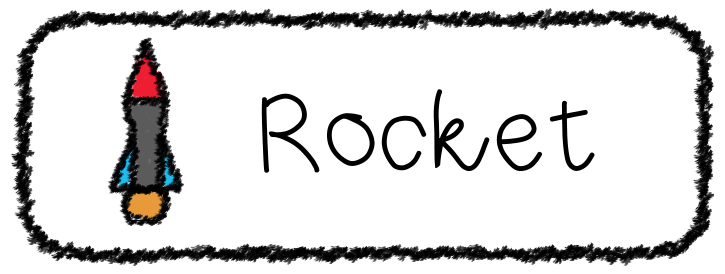
<style>
.page{position:relative;width:725px;height:274px;background:#ffffff}
.page>*{position:absolute;margin:0}
.t1{font:120px "RiseStarHand";color:#000000}
</style>
<div class="page">
<p class="t1" style="left:261px;top:89px;width:334px;height:84px">Rocket</p>
</div>
